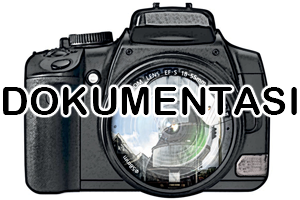
<style>
.page{position:relative;width:300px;height:200px;background:#ffffff}
.page>*{position:absolute;margin:0}
.t1{font:38.8px "ArialRoundedMTBold";color:#000000}
</style>
<div class="page">
<p class="t1" style="left:3px;top:87px;width:294px;height:28px">DOKUMENTASI</p>
</div>
